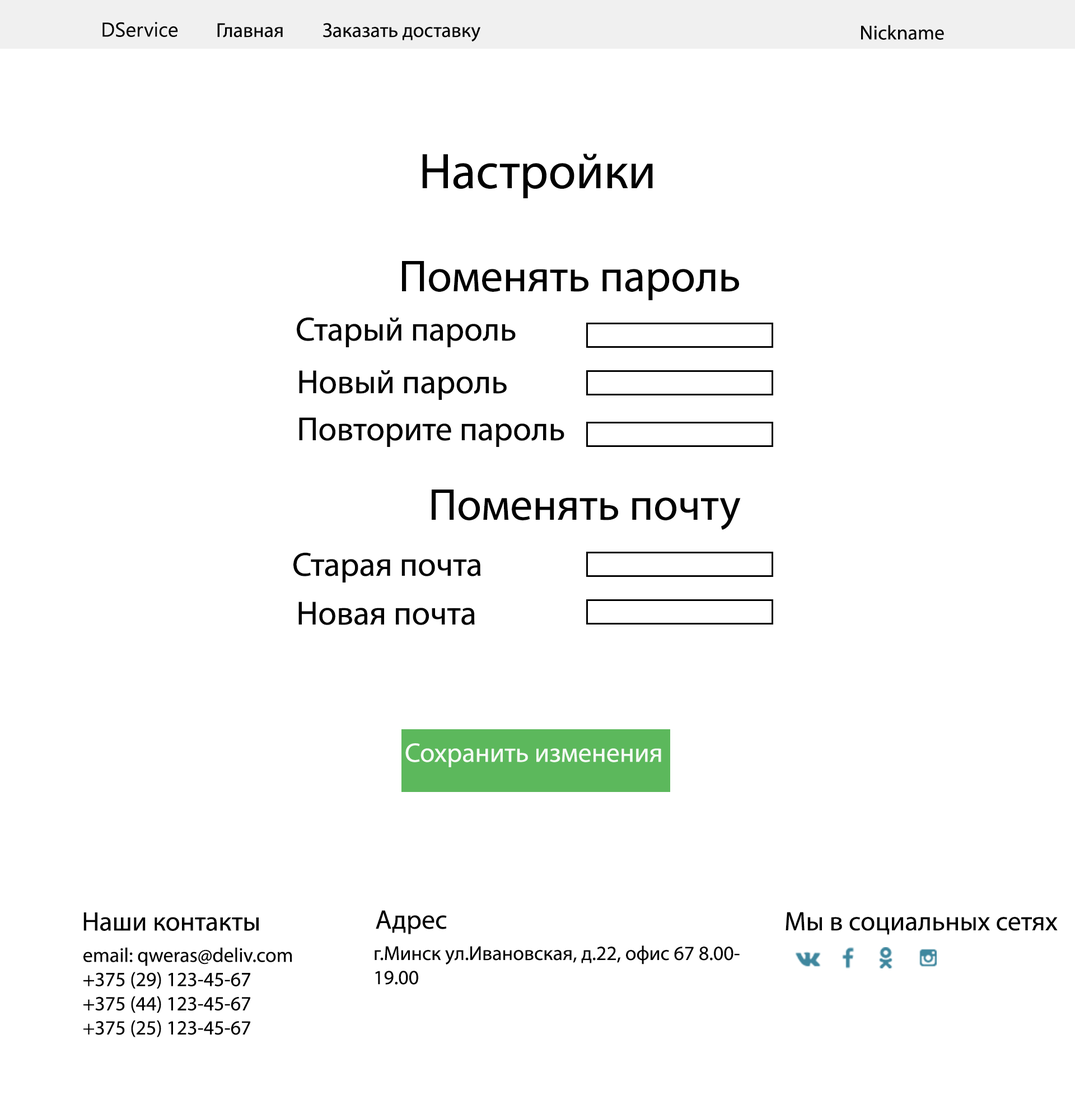
<style>
.page{position:relative;width:1075px;height:1109px;background:#ffffff}
.page>*{position:absolute;margin:0}
.t1{font:20.2px "LeelawadeeUI";color:#010101}
.t2{font:20.2px "MyriadPro-Regular";color:#000000}
.t3{font:50.4px "MyriadPro-Regular";color:#000000}
.t4{font:44.8px "MyriadPro-Regular";color:#000000}
.t5{font:33.6px "MyriadPro-Regular";color:#000000}
.t6{font:26.9px "MyriadPro-Regular";color:#f5faf5}
.t7{font:26.9px "MyriadPro-Regular";color:#000000}
</style>
<div class="page">
<p class="t1" style="left:102px;top:22px;width:76px;height:15px">DService</p>
<p class="t2" style="left:217px;top:23px;width:66px;height:15px">Главная</p>
<p class="t2" style="left:323px;top:23px;width:158px;height:18px">Заказать доставку</p>
<p class="t2" style="left:861px;top:25px;width:83px;height:15px">Nickname</p>
<p class="t3" style="left:422px;top:153px;width:231px;height:45px">Настройки</p>
<p class="t4" style="left:402px;top:261px;width:337px;height:39px">Поменять пароль</p>
<p class="t5" style="left:297px;top:317px;width:219px;height:30px">Старый пароль</p>
<p class="t5" style="left:299px;top:370px;width:208px;height:30px">Новый пароль</p>
<p class="t5" style="left:299px;top:417px;width:266px;height:30px">Повторите пароль</p>
<p class="t4" style="left:432px;top:489px;width:309px;height:41px">Поменять почту</p>
<p class="t5" style="left:293px;top:552px;width:188px;height:30px">Старая почта</p>
<p class="t5" style="left:299px;top:602px;width:176px;height:23px">Новая почта</p>
<p class="t6" style="left:405px;top:743px;width:256px;height:24px">Сохранить изменения</p>
<p class="t7" style="left:83px;top:912px;width:176px;height:19px">Наши контакты</p>
<p class="t7" style="left:376px;top:910px;width:71px;height:24px">Адрес</p>
<p class="t7" style="left:786px;top:912px;width:272px;height:23px">Мы в социальных сетях</p>
<p class="t2" style="left:83px;top:947px;width:209px;height:90px">email: qweras@deliv.com<br>+375 (29) 123-45-67<br>+375 (44) 123-45-67<br>+375 (25) 123-45-67</p>
<p class="t2" style="left:375px;top:945px;width:365px;height:40px">г.Минск ул.Ивановская, д.22, офис 67 8.00- <br>19.00</p>
</div>
